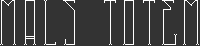
<style>
.page{position:relative;width:200px;height:46px;background:#333333}
.page>*{position:absolute;margin:0}
.t1{font:44.5px "HFraternal-Normal";letter-spacing:0.14em;color:#ffffff}
</style>
<div class="page">
<p class="t1" style="left:0px;top:0px;width:199px;height:45px">MALS totem</p>
</div>
